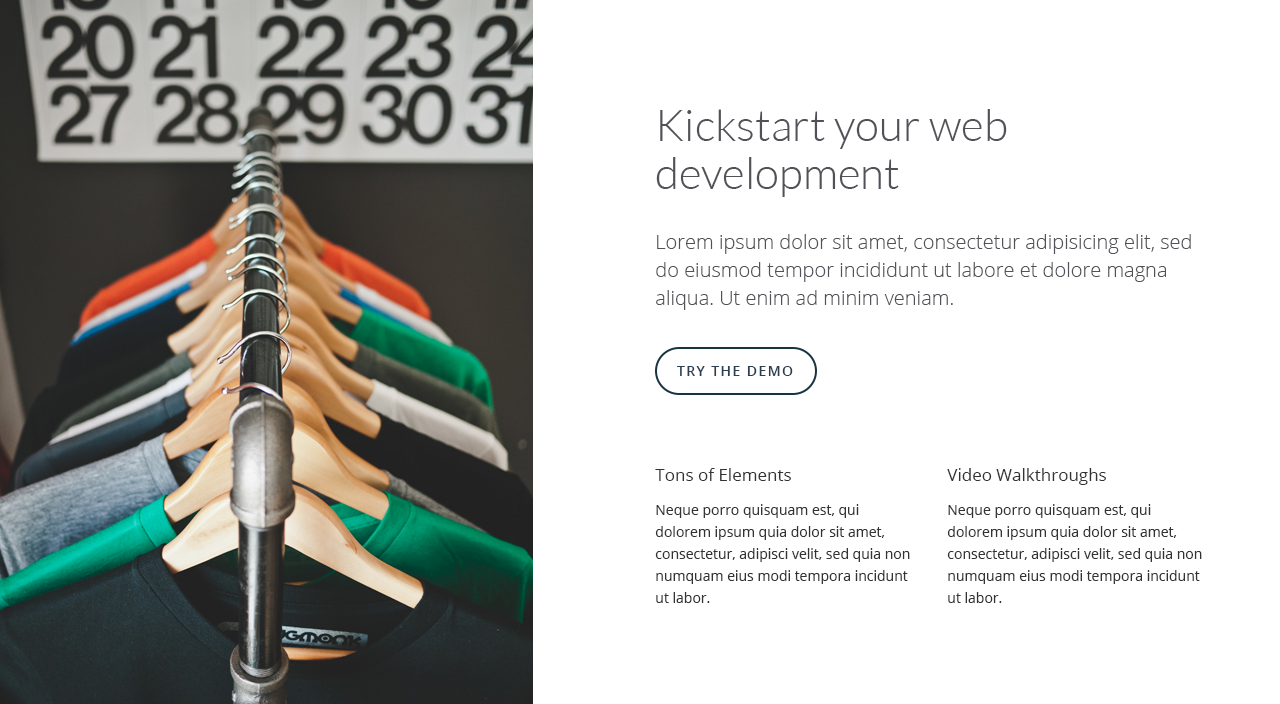
<style>
.page{position:relative;width:1280px;height:704px;background:#ffffff}
.page>*{position:absolute;margin:0}
.t1{font:44px/48px "Lato-Light";color:#515157}
.t2{font:20px/28px "OpenSans-Light";color:#515157}
.t3{font:14px "OpenSans-Semibold";letter-spacing:0.1em;color:#2c3e50}
.t4{font:17px "OpenSans";color:#333333}
.t5{font:14px/22px "OpenSans";color:#333333}
</style>
<div class="page">
<p class="t1" style="left:656px;top:109px;width:351px;height:88px">Kickstart your web development</p>
<p class="t2" style="left:656px;top:234px;width:535px;height:76px">Lorem ipsum dolor sit amet, consectetur adipisicing elit, sed do eiusmod tempor incididunt ut labore et dolore magna aliqua. Ut enim ad minim veniam.</p>
<p class="t3" style="left:677px;top:366px;width:116px;height:10px">TRY THE DEMO</p>
<p class="t4" style="left:655px;top:468px;width:136px;height:13px">Tons of Elements</p>
<p class="t4" style="left:947px;top:468px;width:159px;height:17px">Video Walkthroughs</p>
<p class="t5" style="left:655px;top:504px;width:255px;height:99px">Neque porro quisquam est, qui dolorem ipsum quia dolor sit amet, consectetur, adipisci velit, sed quia non numquam eius modi tempora incidunt ut labor.</p>
<p class="t5" style="left:947px;top:504px;width:255px;height:99px">Neque porro quisquam est, qui dolorem ipsum quia dolor sit amet, consectetur, adipisci velit, sed quia non numquam eius modi tempora incidunt ut labor.</p>
</div>
